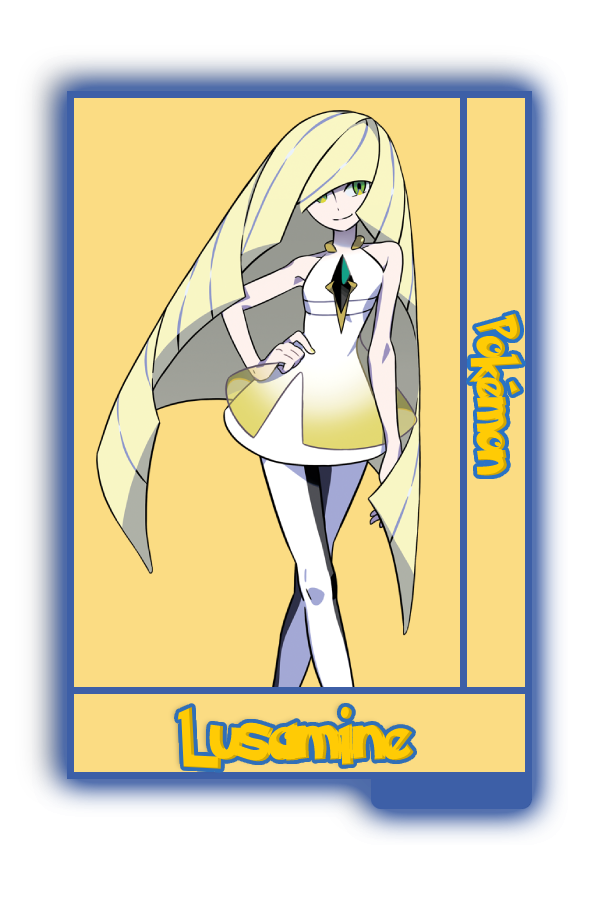
<style>
.page{position:relative;width:600px;height:900px;background:#fbdc83}
.page>*{position:absolute;margin:0}
.t1{font:48.8px "PokemonSolidNormal";color:#ffcb05;scale:0.8 1}
.t2{font:56.6px "PokemonSolidNormal";color:#ffcb05;scale:0.92 1}
</style>
<div class="page">
<p class="t1" style="left:469px;top:313px;width:54px;height:163px;rotate:90deg">Pokémon</p>
<p class="t2" style="left:177px;top:706px;width:237px;height:63px">Lusamine</p>
</div>
